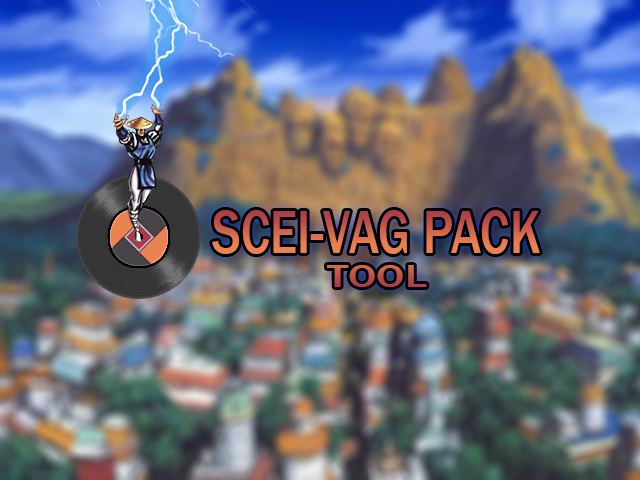
<style>
.page{position:relative;width:640px;height:480px}
.page>*{position:absolute;margin:0}
.t1{font:63.1px/6.8px "FranklinGothic-Medium";scale:0.8 1}
.t2{font:33.1px/0px "FranklinGothic-Medium";scale:1.33 1}
</style>
<div class="page">
<p class="t1" style="left:212px;top:210px;width:328px;height:77px">SCEI-VAG PACK<br>    <span class="t2">TOOL</span></p>
</div>
